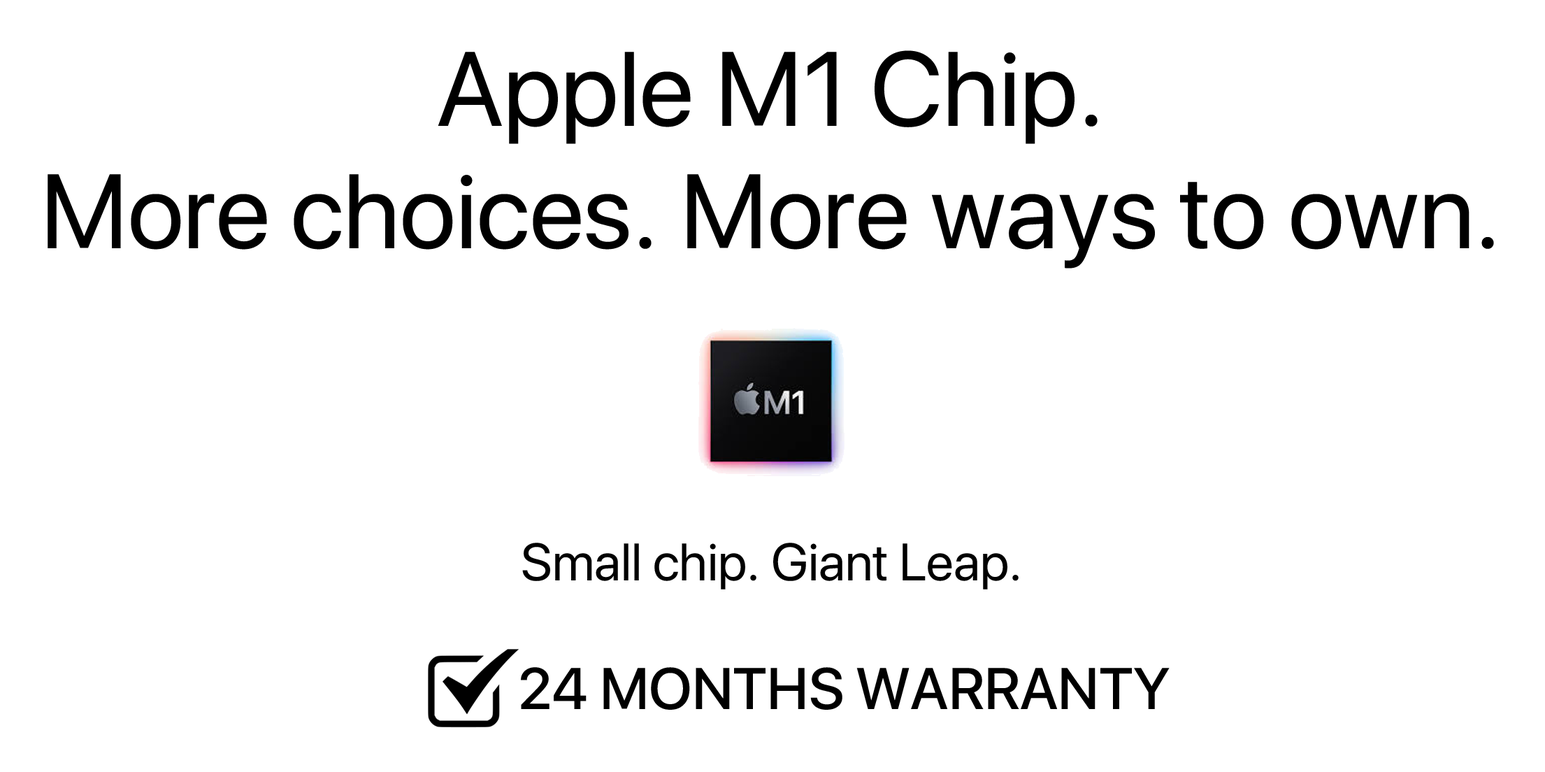
<style>
.page{position:relative;width:1545px;height:772px;background:#ffffff}
.page>*{position:absolute;margin:0}
.t1{font:104.9px/69.9px "SFProDisplay-Regular";color:#000000}
.t2{font:52.4px "SFProDisplay-Regular";color:#000000}
.t3{font:58.3px "SFProDisplay-Medium";color:#000000}
</style>
<div class="page">
<p class="t1" style="left:48px;top:50px;width:1446px;height:218px;text-align:center">Apple M1 Chip.<br>More choices. More ways to own.</p>
<p class="t2" style="left:522px;top:542px;width:497px;height:47px">Small chip. Giant Leap.</p>
<p class="t3" style="left:521px;top:667px;width:649px;height:43px">24 MONTHS WARRANTY</p>
</div>
